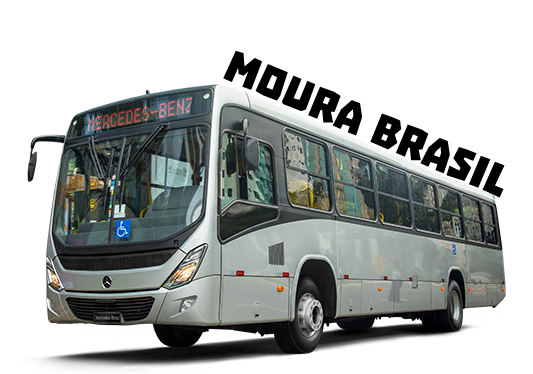
<style>
.page{position:relative;width:533px;height:374px;background:#ffffff}
.page>*{position:absolute;margin:0}
.t1{font:50px "Troika";color:#000000}
</style>
<div class="page">
<p class="t1" style="left:223px;top:50px;width:282px;height:148px;rotate:23deg">moura brasil</p>
</div>
